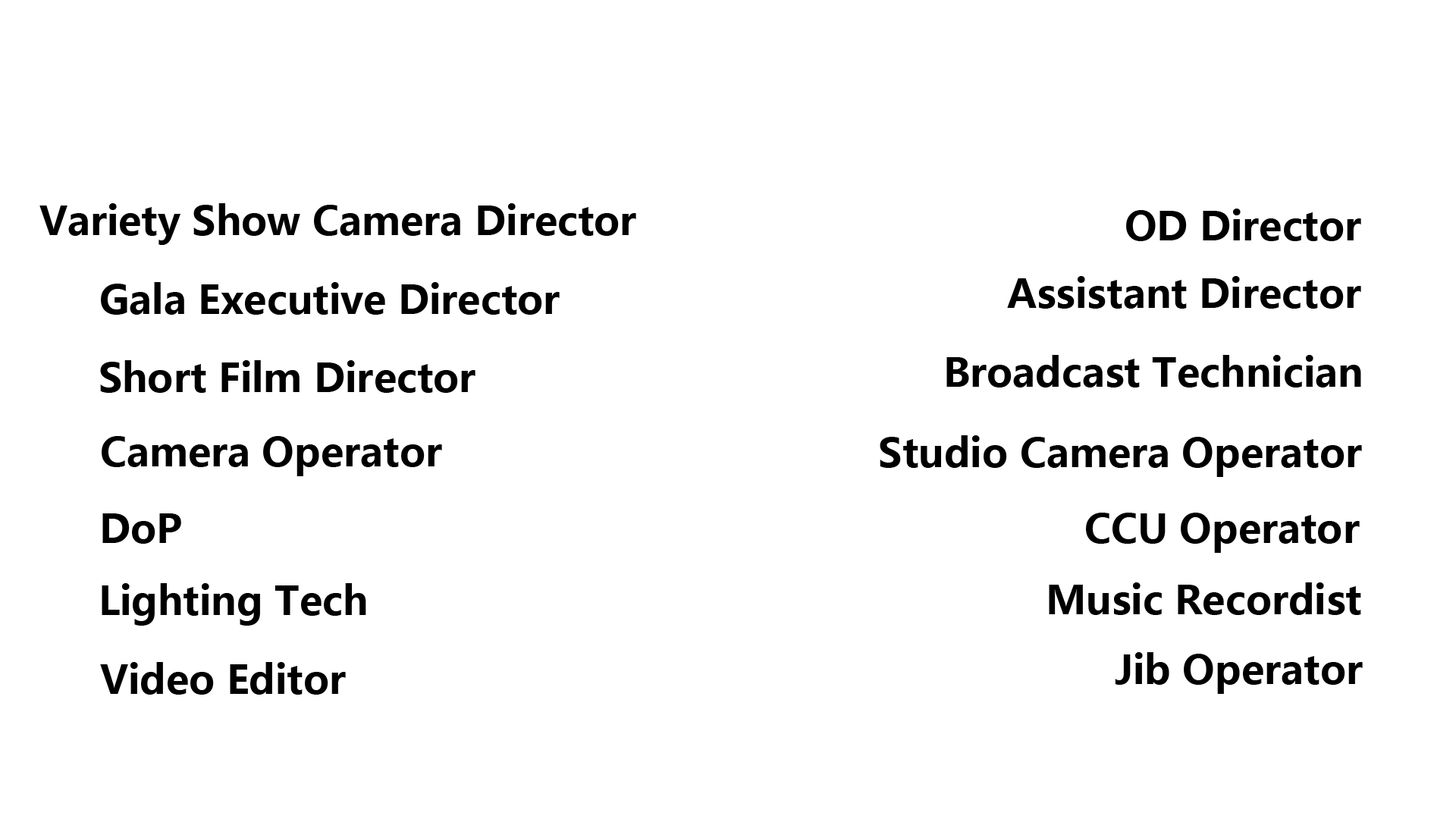
<style>
.page{position:relative;width:1456px;height:819px;background:#ffffff}
.page>*{position:absolute;margin:0}
.t1{font:39.4px "MicrosoftYaHei-Bold";color:#000000}
</style>
<div class="page">
<p class="t1" style="left:39px;top:203px;width:597px;height:42px">Variety Show Camera Director</p>
<p class="t1" style="left:1126px;top:209px;width:235px;height:32px">OD Director</p>
<p class="t1" style="left:1007px;top:276px;width:354px;height:33px">Assistant Director</p>
<p class="t1" style="left:101px;top:282px;width:459px;height:33px">Gala Executive Director</p>
<p class="t1" style="left:100px;top:360px;width:375px;height:33px">Short Film Director</p>
<p class="t1" style="left:946px;top:355px;width:415px;height:33px">Broadcast Technician</p>
<p class="t1" style="left:102px;top:436px;width:340px;height:40px">Camera Operator</p>
<p class="t1" style="left:880px;top:435px;width:482px;height:42px">Studio Camera Operator</p>
<p class="t1" style="left:102px;top:513px;width:79px;height:31px">DoP</p>
<p class="t1" style="left:1086px;top:513px;width:274px;height:40px">CCU Operator</p>
<p class="t1" style="left:102px;top:583px;width:264px;height:43px">Lighting Tech</p>
<p class="t1" style="left:1049px;top:582px;width:312px;height:33px">Music Recordist</p>
<p class="t1" style="left:1115px;top:652px;width:248px;height:42px">Jib Operator</p>
<p class="t1" style="left:100px;top:662px;width:246px;height:33px">Video Editor</p>
</div>
